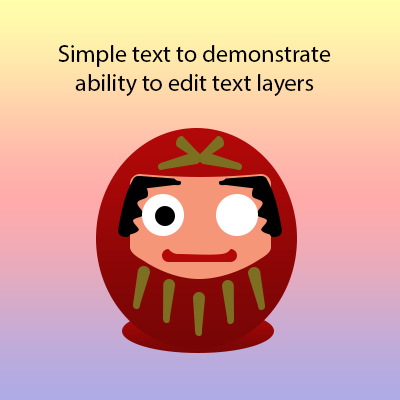
<style>
.page{position:relative;width:400px;height:400px}
.page>*{position:absolute;margin:0}
.t1{font:24px "MyriadPro-Regular";color:#000000}
</style>
<div class="page">
<p class="t1" style="left:58px;top:45px;width:273px;height:51px;text-align:center">Simple text to demonstrate ability to edit text layers</p>
</div>
